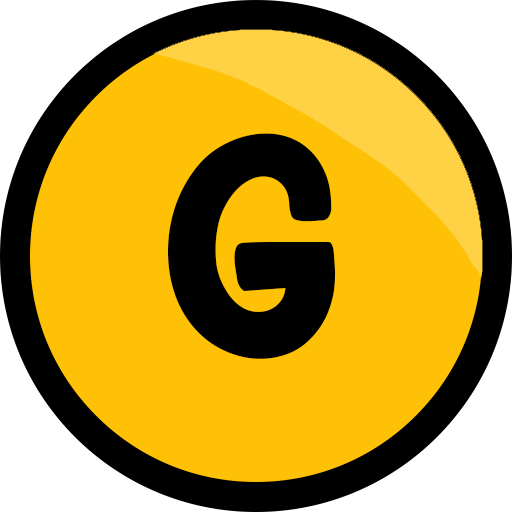
<style>
.page{position:relative;width:512px;height:512px;background:#ffc105}
.page>*{position:absolute;margin:0}
.t1{font:300px "Hey-Comic";color:#000000;text-transform:uppercase}
</style>
<div class="page">
<p class="t1" style="left:168px;top:133px;width:168px;height:226px">g</p>
</div>
